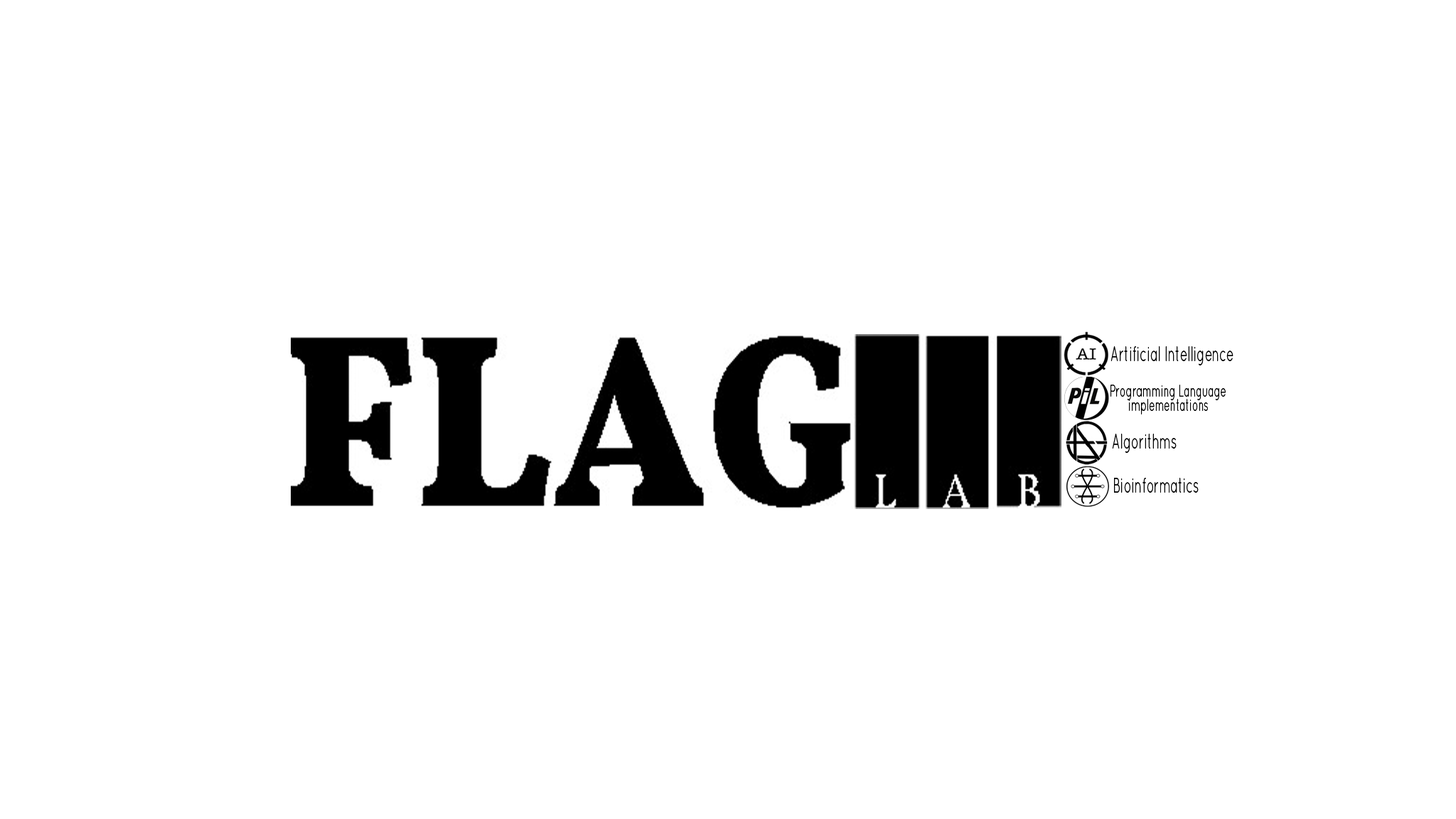
<style>
.page{position:relative;width:1456px;height:819px;background:#ffffff}
.page>*{position:absolute;margin:0}
.t1{font:21.3px "Quicksand-Regular";color:#000000;scale:0.56 1}
.t2{font:17.1px "Quicksand-Regular";color:#000000;scale:0.56 1}
</style>
<div class="page">
<p class="t1" style="left:1110px;top:346px;width:123px;height:19px">Artificial Intelligence</p>
<p class="t2" style="left:1110px;top:385px;width:116px;height:15px">Programming Language</p>
<p class="t2" style="left:1129px;top:399px;width:79px;height:15px">implementations</p>
<p class="t1" style="left:1112px;top:434px;width:65px;height:19px">Algorithms</p>
<p class="t1" style="left:1114px;top:478px;width:85px;height:15px">Bioinformatics</p>
</div>
